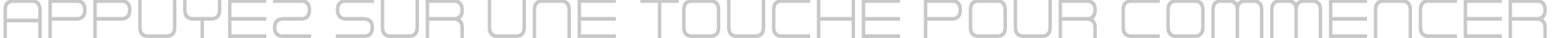
<style>
.page{position:relative;width:1568px;height:38px;background:#ffffff}
.page>*{position:absolute;margin:0}
.t1{font:70.8px "FuturisticArmour";color:#c8c8c8}
</style>
<div class="page">
<p class="t1" style="left:3px;top:0px;width:1544px;height:38px">appuyez sur une touche pour commencer</p>
</div>
